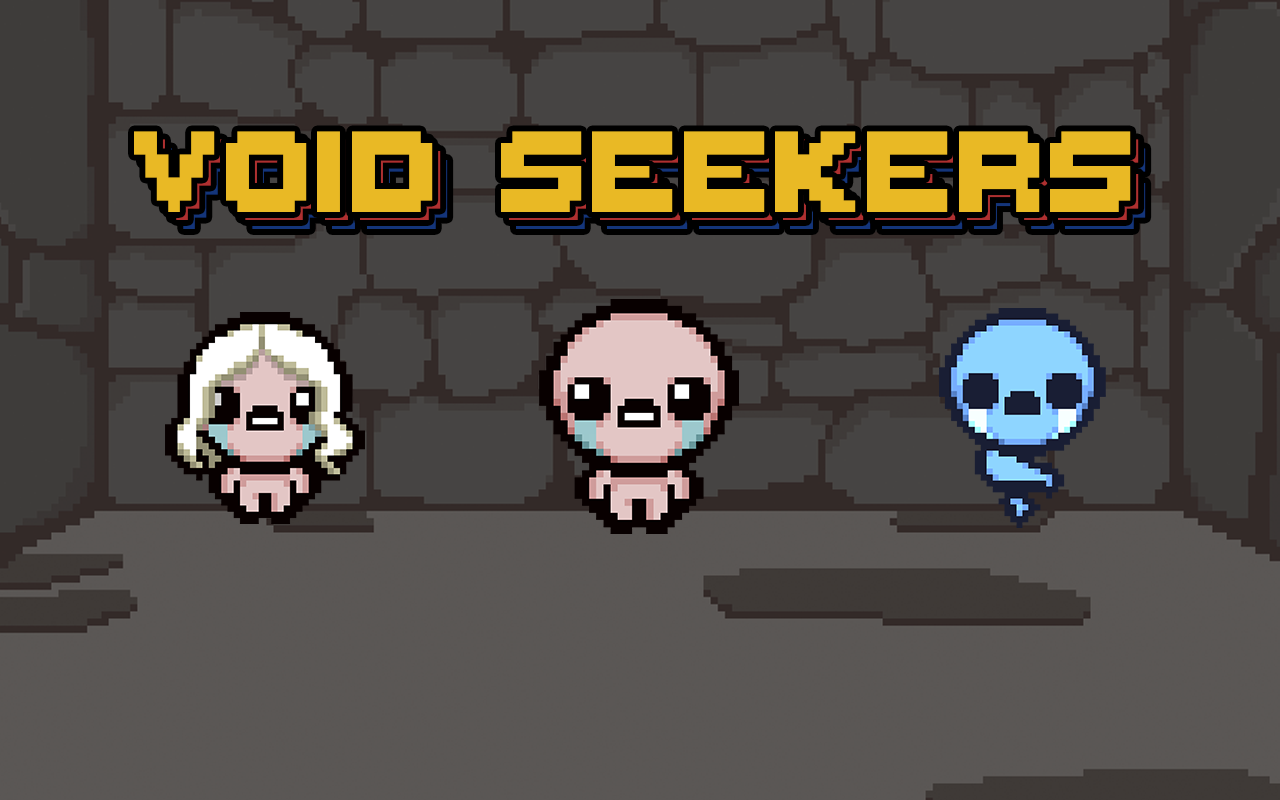
<style>
.page{position:relative;width:1280px;height:800px;background:#464443}
.page>*{position:absolute;margin:0}
.t1{font:184.1px "ThaleahFat";color:#e9b925}
</style>
<div class="page">
<p class="t1" style="left:134px;top:131px;width:997px;height:81px">VOID SEEKERS</p>
</div>
